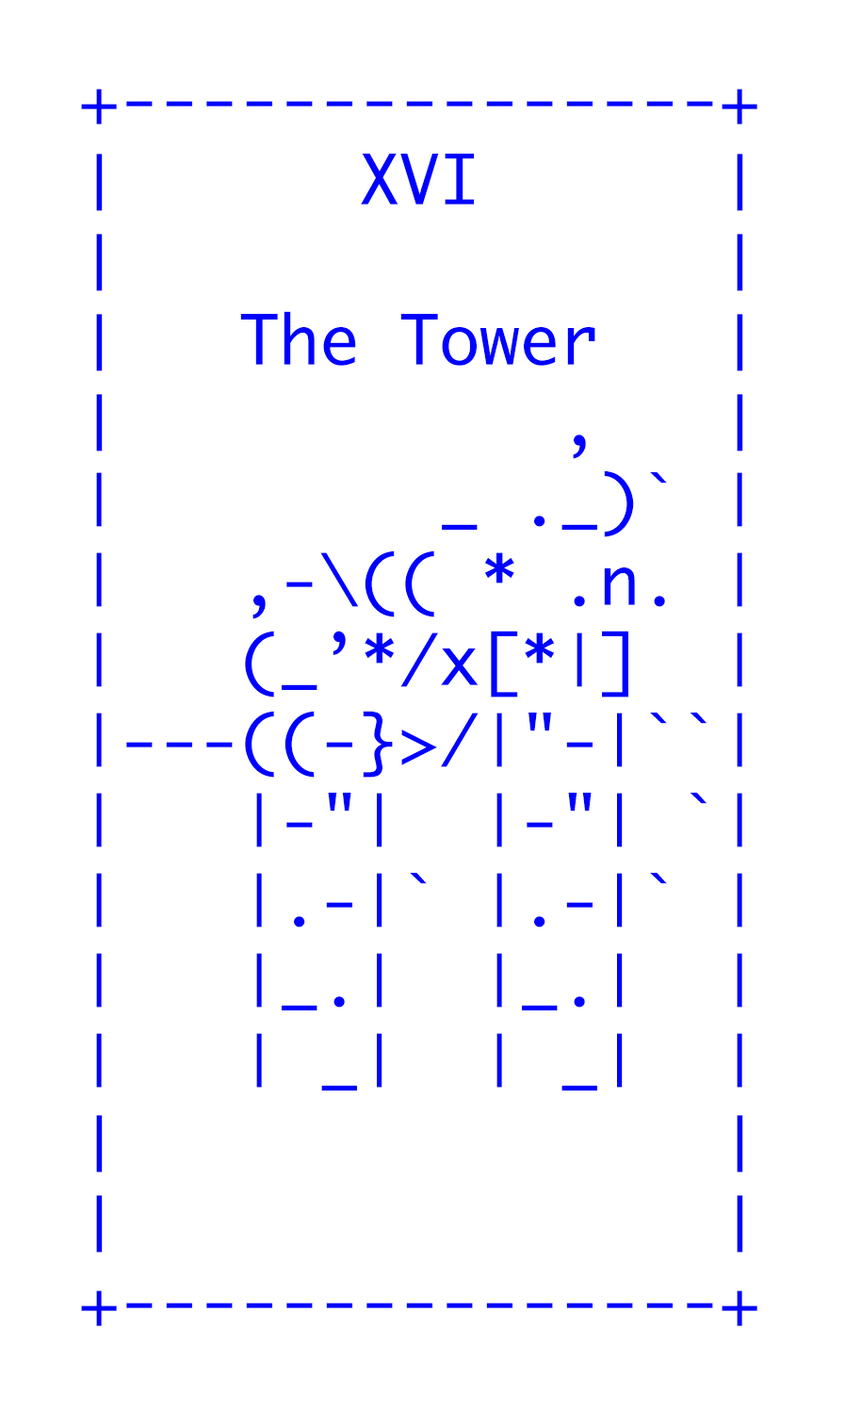
<style>
.page{position:relative;width:845px;height:1411px;background:#ffffff}
.page>*{position:absolute;margin:0}
.t1{font:66.7px "Monaco";color:#0000ff}
</style>
<div class="page">
<p class="t1" style="left:81px;top:89px;width:677px;height:1237px">+---------------+<br>│      XVI      │<br>│               │<br>│   The Tower   │               │           ,   │<br>|        _ ._)` |<br>|   ,-\(( * .n. |                <br>|   (_’*/x[*|]  |<br>|---((-}&gt;/|"-|``|<br>|   |-"|  |-"| `|<br>|   |.-|` |.-|` |<br>|   |_.|  |_.|  |  <br>|   | _|  | _|  |<br>│               │<br>│               │<br>+---------------+</p>
</div>
